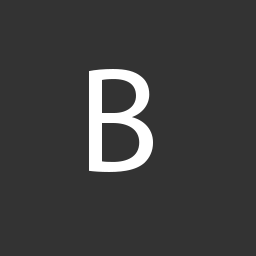
<style>
.page{position:relative;width:256px;height:256px;background:#333333}
.page>*{position:absolute;margin:0}
.t1{font:150px "MyriadPro-Regular";color:#ffffff}
</style>
<div class="page">
<p class="t1" style="left:89px;top:69px;width:64px;height:103px">B</p>
</div>
